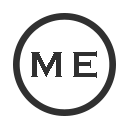
<style>
.page{position:relative;width:128px;height:128px;background:#ffffff}
.page>*{position:absolute;margin:0}
.t1{font:47.5px "Copperplate";letter-spacing:0.06em;color:#303030}
</style>
<div class="page">
<p class="t1" style="left:31px;top:51px;width:66px;height:27px">ME</p>
</div>
